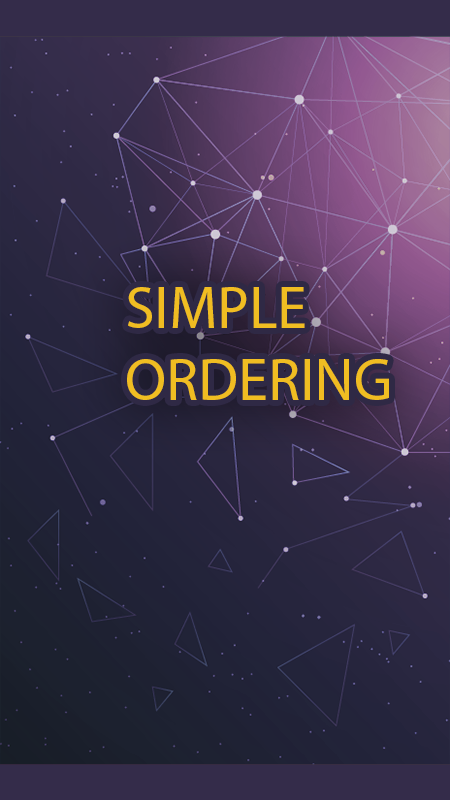
<style>
.page{position:relative;width:450px;height:800px}
.page>*{position:absolute;margin:0}
.t1{font:60px "MyriadPro-Regular";color:#f0bd22}
</style>
<div class="page">
<p class="t1" style="left:127px;top:287px;width:262px;height:113px">SIMPLE <br>ORDERING</p>
</div>
